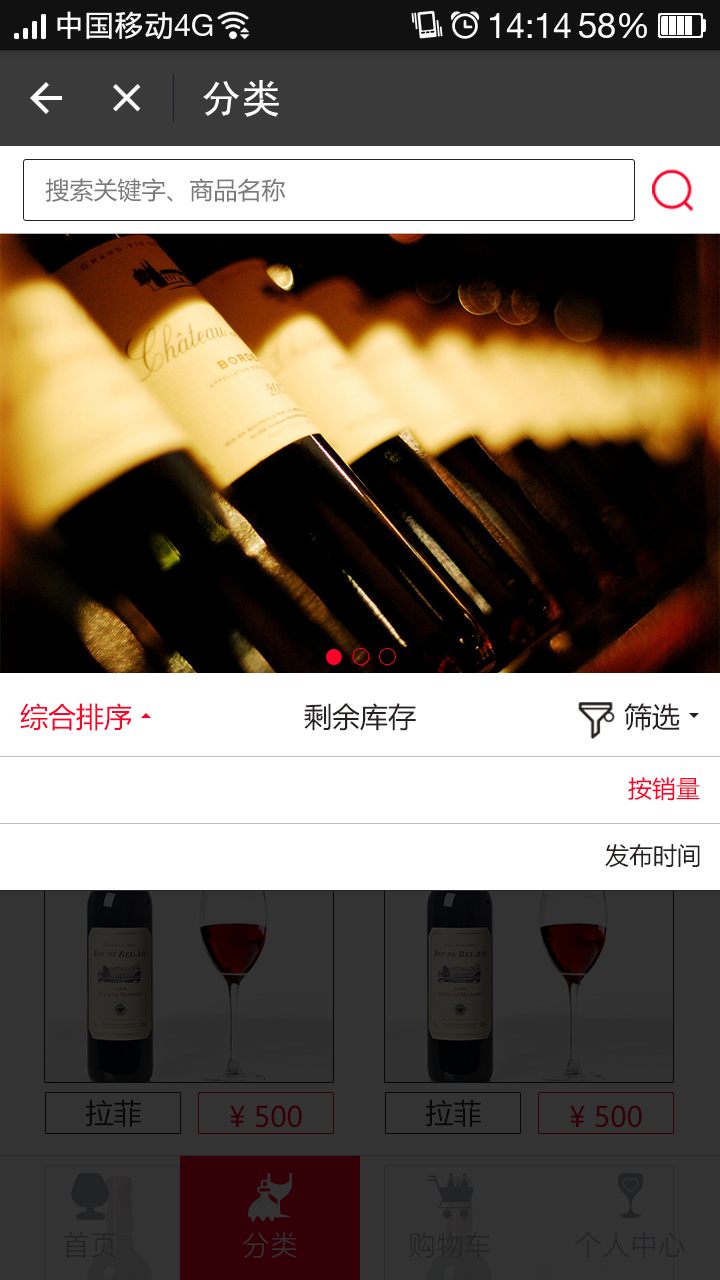
<style>
.page{position:relative;width:720px;height:1280px;background:#ffffff}
.page>*{position:absolute;margin:0}
.t1{font:40px "SimHei";color:#ffffff}
.t2{font:24px "MicrosoftYaHei";color:#7a7a7a}
.t3{font:28px "MicrosoftYaHei";color:#ff0029}
.t4{font:28px "MicrosoftYaHei";color:#242120}
.t5{font:24px "MicrosoftYaHei";color:#ff0029;text-transform:uppercase}
.t6{font:24px "MicrosoftYaHei";color:#242120;text-transform:uppercase}
.t7{font:28px "MicrosoftYaHei";color:#070706;text-transform:uppercase}
.t8{font:28px "MicrosoftYaHei";color:#330008}
.t9{font:28px "PingFang-SC-Regular";color:#222325;text-transform:uppercase}
.t10{font:28px "PingFang-SC-Regular";color:#333333;text-transform:uppercase}
.t11{font:28px "PingFang-SC-Regular";color:#222222;text-transform:uppercase}
</style>
<div class="page">
<p class="t1" style="left:203px;top:80px;width:76px;height:37px">分类</p>
<p class="t2" style="left:45px;top:178px;width:241px;height:24px">搜索关键字、商品名称</p>
<p class="t3" style="left:20px;top:703px;width:112px;height:28px">综合排序</p>
<p class="t4" style="left:304px;top:703px;width:112px;height:28px">剩余库存</p>
<p class="t4" style="left:624px;top:703px;width:56px;height:28px">筛选</p>
<p class="t5" style="left:628px;top:777px;width:72px;height:24px">按销量</p>
<p class="t6" style="left:605px;top:843px;width:95px;height:25px">发布时间</p>
<p class="t7" style="left:86px;top:1099px;width:55px;height:28px">拉菲</p>
<p class="t8" style="left:230px;top:1105px;width:72px;height:23px">¥ 500</p>
<p class="t7" style="left:426px;top:1099px;width:55px;height:28px">拉菲</p>
<p class="t8" style="left:570px;top:1105px;width:72px;height:23px">¥ 500</p>
<p class="t9" style="left:63px;top:1232px;width:54px;height:26px">首页</p>
<p class="t10" style="left:243px;top:1232px;width:54px;height:26px">分类</p>
<p class="t11" style="left:409px;top:1232px;width:81px;height:26px">购物车</p>
<p class="t9" style="left:575px;top:1232px;width:110px;height:26px">个人中心</p>
</div>
